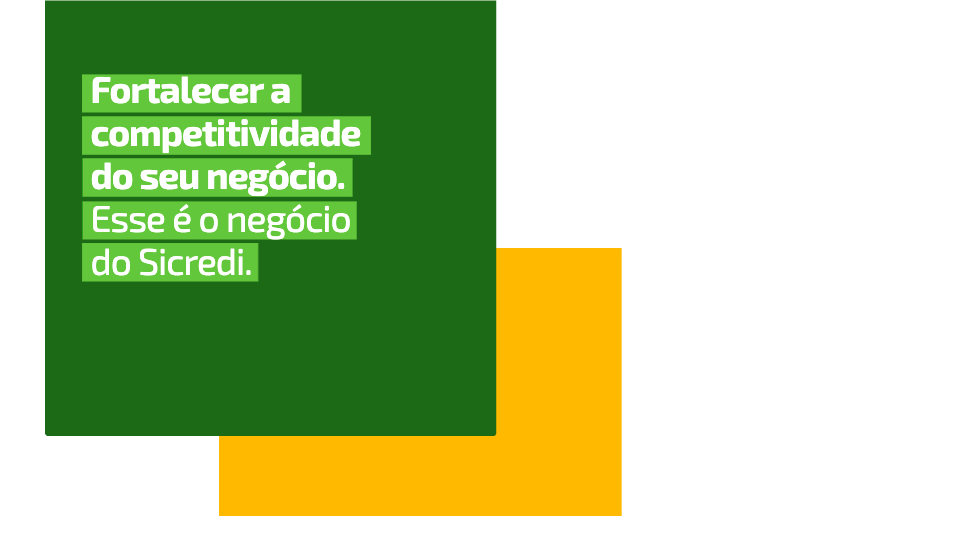
<style>
.page{position:relative;width:960px;height:540px;background:#ffffff}
.page>*{position:absolute;margin:0}
.t1{font:37px/43px "Exo2-Bold";letter-spacing:-0.025em;color:#ffffff}
.t2{font:37px/43px "Exo2-Regular";letter-spacing:-0.025em;color:#ffffff}
</style>
<div class="page">
<p class="t1" style="left:90px;top:77px;width:271px;height:205px">Fortalecer a<br>competitividade<br>do seu negócio. <br><span class="t2">Esse é o negócio<br>do Sicredi.</span></p>
</div>
